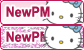
<style>
.page{position:relative;width:84px;height:50px;background:#ffffff}
.page>*{position:absolute;margin:0}
.t1{font:14px "Arial-BoldMT";color:#ad194f;scale:0.89 1}
</style>
<div class="page">
<p class="t1" style="left:6px;top:31px;width:44px;height:11px">NewPM</p>
</div>
